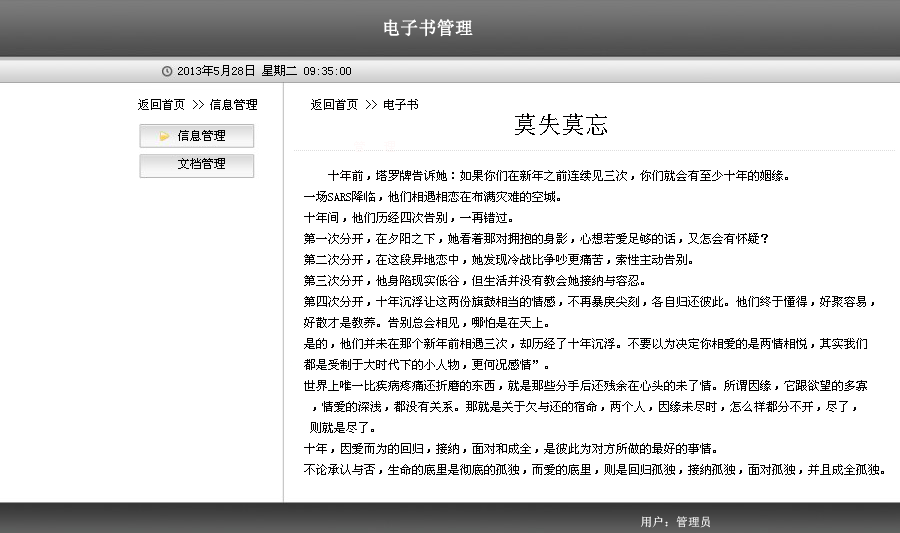
<style>
.page{position:relative;width:900px;height:533px;background:#ffffff}
.page>*{position:absolute;margin:0}
.t1{font:17.8px "SimSun";color:#ffffff;font-weight:bold}
.t2{font:11.9px "SimSun";color:#000000}
.t3{font:12px "SimSun";color:#010000}
.t4{font:24px "SimSun";color:#010000}
.t5{font:11.9px "SimSun";color:#ffffff}
</style>
<div class="page">
<p class="t1" style="left:384px;top:19px;width:89px;height:18px">电子书管理</p>
<p class="t2" style="left:178px;top:65px;width:173px;height:11px">2013年5月28日 星期二 09:35:00</p>
<p class="t2" style="left:138px;top:99px;width:119px;height:11px">返回首页 &gt;&gt; 信息管理</p>
<p class="t3" style="left:311px;top:99px;width:107px;height:11px">返回首页 &gt;&gt; 电子书</p>
<p class="t4" style="left:515px;top:113px;width:92px;height:22px">莫失莫忘</p>
<p class="t2" style="left:178px;top:130px;width:47px;height:11px">信息管理</p>
<p class="t2" style="left:178px;top:158px;width:47px;height:11px">文档管理</p>
<p class="t3" style="left:304px;top:170px;width:580px;height:305px">十年前，塔罗牌告诉她：如果你们在新年之前连续见三次，你们就会有至少十年的姻缘。<br>　　一场SARS降临，他们相遇相恋在布满灾难的空城。<br>　　十年间，他们历经四次告别，一再错过。<br>　　第一次分开，在夕阳之下，她看着那对拥抱的身影，心想若爱足够的话，又怎会有怀疑？<br>　　第二次分开，在这段异地恋中，她发现冷战比争吵更痛苦，索性主动告别。<br>　　第三次分开，他身陷现实低谷，但生活并没有教会她接纳与容忍。<br>　　第四次分开，十年沉浮让这两份旗鼓相当的情感，不再暴戾尖刻，各自归还彼此。他们终于懂得，好聚容易，<br>    好散才是教养。告别总会相见，哪怕是在天上。<br>　　是的，他们并未在那个新年前相遇三次，却历经了十年沉浮。不要以为决定你相爱的是两情相悦，其实我们<br>    都是受制于大时代下的小人物，更何况感情”。<br>　　世界上唯一比疾病疼痛还折磨的东西，就是那些分手后还残余在心头的未了情。所谓因缘，它跟欲望的多寡<br>     ，情爱的深浅，都没有关系。那就是关于欠与还的宿命，两个人，因缘未尽时，怎么样都分不开，尽了，<br>     则就是尽了。<br>　　十年，因爱而为的回归，接纳，面对和成全，是彼此为对方所做的最好的事情。<br>　　不论承认与否，生命的底里是彻底的孤独，而爱的底里，则是回归孤独，接纳孤独，面对孤独，并且成全孤独。</p>
<p class="t5" style="left:641px;top:516px;width:69px;height:12px">用户：管理员</p>
</div>
